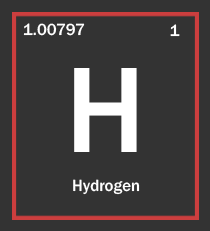
<style>
.page{position:relative;width:210px;height:231px;background:#333333}
.page>*{position:absolute;margin:0}
.t1{font:16.8px "FranklinGothic-Medium";color:#ffffff}
.t2{font:126.1px "FranklinGothic-Medium";color:#ffffff}
</style>
<div class="page">
<p class="t1" style="left:23px;top:23px;width:62px;height:13px">1.00797</p>
<p class="t1" style="left:170px;top:24px;width:10px;height:13px">1</p>
<p class="t2" style="left:74px;top:68px;width:63px;height:84px">H</p>
<p class="t1" style="left:73px;top:179px;width:67px;height:16px">Hydrogen</p>
</div>
